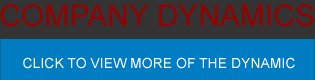
<style>
.page{position:relative;width:315px;height:80px;background:#007cc2}
.page>*{position:absolute;margin:0}
.t1{font:30px "ArialMT";color:#960000;text-transform:uppercase}
.t2{font:14px "ArialMT";color:#fefefe;text-transform:uppercase}
</style>
<div class="page">
<p class="t1" style="left:0px;top:4px;width:314px;height:23px">Company dynamics</p>
<p class="t2" style="left:23px;top:57px;width:272px;height:12px">Click to view more of the dynamic</p>
</div>
